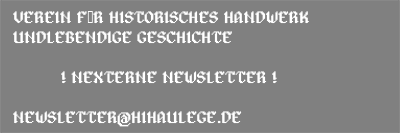
<style>
.page{position:relative;width:400px;height:133px;background:#808080}
.page>*{position:absolute;margin:0}
.t1{font:16.7px "Alagard";color:#ffffff;text-transform:uppercase}
</style>
<div class="page">
<p class="t1" style="left:13px;top:11px;width:296px;height:116px">Verein für historisches Handwerk undlebendige Geschichte<br><br> ! NExterne Newsletter !<br><br>newsletter@hihaulege.de</p>
</div>
